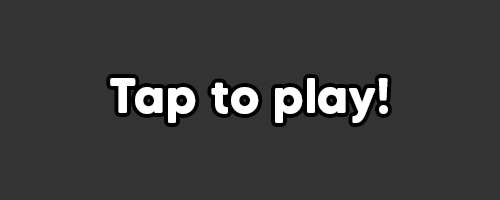
<style>
.page{position:relative;width:500px;height:200px;background:#333333}
.page>*{position:absolute;margin:0}
.t1{font:50px "MADETommySoft-Bold";color:#ffffff}
</style>
<div class="page">
<p class="t1" style="left:110px;top:78px;width:278px;height:45px">Tap to play!</p>
</div>
